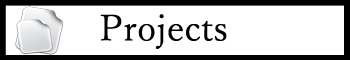
<style>
.page{position:relative;width:350px;height:60px;background:#ffffff}
.page>*{position:absolute;margin:0}
.t1{font:36px "YuMincho-Regular";color:#000000}
</style>
<div class="page">
<p class="t1" style="left:100px;top:14px;width:127px;height:35px">Projects</p>
</div>
